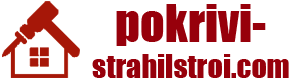
<style>
.page{position:relative;width:300px;height:80px;background:#ffffff}
.page>*{position:absolute;margin:0}
.t1{font:30px "Impact";color:#97000b}
.t2{font:48px "Impact";color:#97000b}
</style>
<div class="page">
<p class="t1" style="left:92px;top:4px;width:197px;height:74px;text-align:center"><span class="t2">pokrivi-<br></span>strahilstroi.com</p>
</div>
